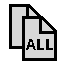
<style>
.page{position:relative;width:64px;height:64px;background:#ffffff}
.page>*{position:absolute;margin:0}
.t1{font:14.9px "NotoSans-Bold";color:#000000}
</style>
<div class="page">
<p class="t1" style="left:26px;top:39px;width:27px;height:11px">ALL</p>
</div>
